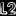
<style>
.page{position:relative;width:16px;height:16px;background:#000000}
.page>*{position:absolute;margin:0}
.t1{font:12.5px "BennyBlanco";color:#ffffff}
</style>
<div class="page">
<p class="t1" style="left:0px;top:2px;width:16px;height:13px">L2</p>
</div>
